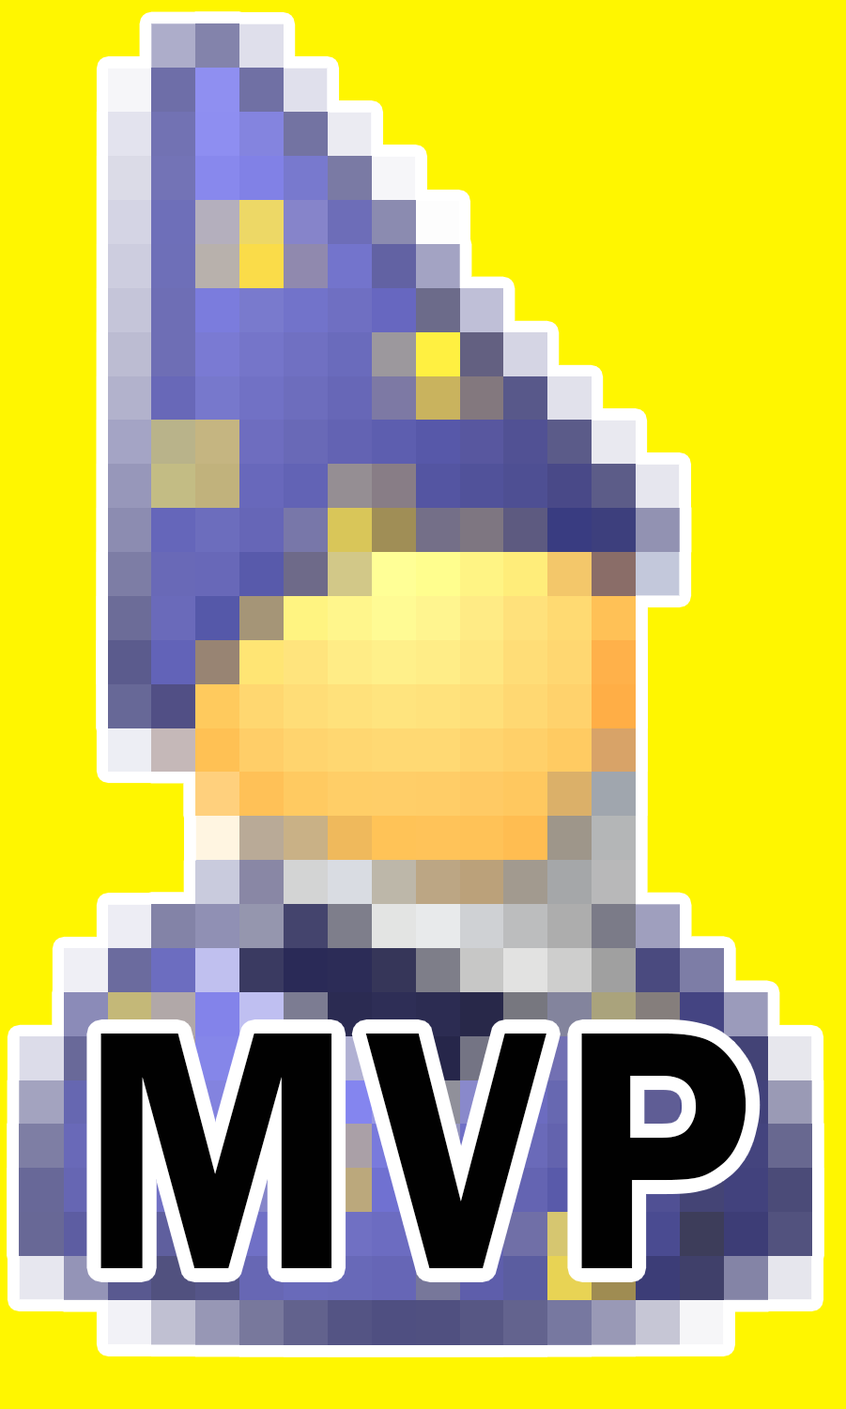
<style>
.page{position:relative;width:846px;height:1409px;background:#fff600}
.page>*{position:absolute;margin:0}
.t1{font:352.2px "FranklinGothic-Demi";letter-spacing:0.05em;color:#010101;text-transform:uppercase;scale:0.9 1}
</style>
<div class="page">
<p class="t1" style="left:100px;top:1034px;width:647px;height:235px">MVP</p>
</div>
